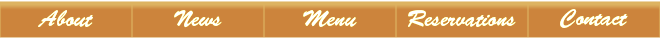
<style>
.page{position:relative;width:660px;height:38px;background:#cc843c}
.page>*{position:absolute;margin:0}
.t1{font:22px "BrushScriptStd";color:#ffffff}
</style>
<div class="page">
<p class="t1" style="left:38px;top:10px;width:55px;height:17px">About</p>
<p class="t1" style="left:38px;top:10px;width:55px;height:17px">About</p>
<p class="t1" style="left:174px;top:10px;width:48px;height:18px">News</p>
<p class="t1" style="left:174px;top:10px;width:48px;height:18px">News</p>
<p class="t1" style="left:303px;top:10px;width:54px;height:17px">Menu</p>
<p class="t1" style="left:303px;top:10px;width:54px;height:17px">Menu</p>
<p class="t1" style="left:408px;top:10px;width:108px;height:17px">Reservations</p>
<p class="t1" style="left:408px;top:10px;width:108px;height:17px">Reservations</p>
<p class="t1" style="left:560px;top:9px;width:68px;height:19px">Contact</p>
<p class="t1" style="left:560px;top:9px;width:68px;height:19px">Contact</p>
</div>
